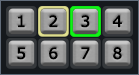
<style>
.page{position:relative;width:139px;height:75px;background:#15191d}
.page>*{position:absolute;margin:0}
.t1{font:15.4px "Verdana";color:#000000;font-weight:bold}
</style>
<div class="page">
<p class="t1" style="left:18px;top:15px;width:7px;height:13px">1</p>
<p class="t1" style="left:49px;top:15px;width:9px;height:13px">2</p>
<p class="t1" style="left:81px;top:15px;width:9px;height:13px">3</p>
<p class="t1" style="left:112px;top:15px;width:10px;height:13px">4</p>
<p class="t1" style="left:17px;top:47px;width:9px;height:13px">5</p>
<p class="t1" style="left:49px;top:47px;width:9px;height:13px">6</p>
<p class="t1" style="left:81px;top:47px;width:9px;height:13px">7</p>
<p class="t1" style="left:113px;top:47px;width:9px;height:13px">8</p>
</div>
